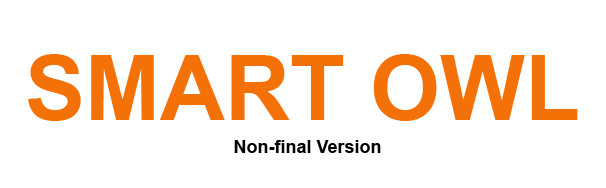
<style>
.page{position:relative;width:606px;height:188px;background:#ffffff}
.page>*{position:absolute;margin:0}
.t1{font:90px "Arial-BoldMT";color:#f47108}
.t2{font:18px "Arial-BoldMT";color:#030303}
</style>
<div class="page">
<p class="t1" style="left:28px;top:54px;width:550px;height:67px">SMART OWL</p>
<p class="t2" style="left:234px;top:140px;width:147px;height:13px">Non-final Version</p>
</div>
